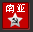
<style>
.page{position:relative;width:33px;height:32px;background:#c50000}
.page>*{position:absolute;margin:0}
.t1{font:10.4px "SimSun";color:#ffffff}
</style>
<div class="page">
<p class="t1" style="left:6px;top:4px;width:19px;height:9px">南亚</p>
</div>
